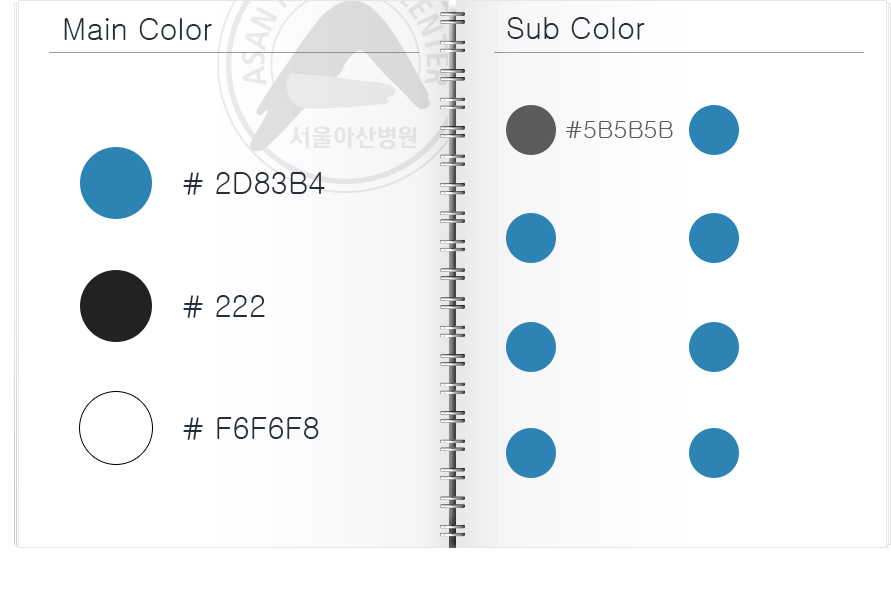
<style>
.page{position:relative;width:891px;height:599px;background:#ffffff}
.page>*{position:absolute;margin:0}
.t1{font:30px "Gulim";color:#262e37}
.t2{font:23.8px "Gulim";color:#5b5b5b}
</style>
<div class="page">
<p class="t1" style="left:507px;top:17px;width:138px;height:23px">Sub Color</p>
<p class="t1" style="left:64px;top:18px;width:148px;height:23px">Main Color</p>
<p class="t2" style="left:566px;top:121px;width:107px;height:17px">#5B5B5B</p>
<p class="t1" style="left:183px;top:172px;width:142px;height:23px"># 2D83B4</p>
<p class="t1" style="left:183px;top:295px;width:82px;height:23px"># 222</p>
<p class="t1" style="left:183px;top:417px;width:136px;height:23px"># F6F6F8</p>
</div>
